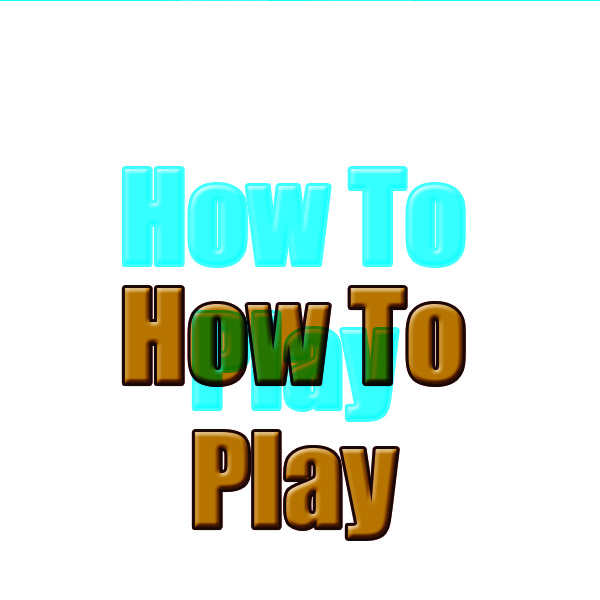
<style>
.page{position:relative;width:600px;height:600px;background:#ffffff}
.page>*{position:absolute;margin:0}
.t1{font:120px "Impact"}
</style>
<div class="page">
<p class="t1" style="left:124px;top:168px;width:339px;height:250px;text-align:center">How To<br>Play</p>
</div>
